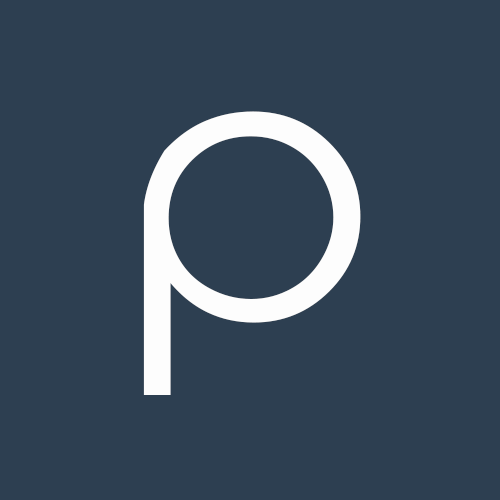
<style>
.page{position:relative;width:500px;height:500px;background:#2d3f51}
.page>*{position:absolute;margin:0}
.t1{font:374.8px "RoundedElegance-Regular";letter-spacing:-0.005em;color:#fdfdfd;scale:1.04 1}
</style>
<div class="page">
<p class="t1" style="left:143px;top:111px;width:218px;height:284px">p</p>
</div>
